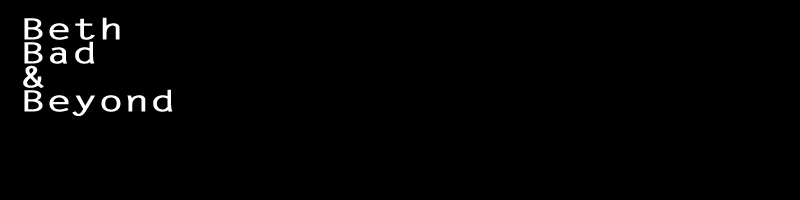
<style>
.page{position:relative;width:800px;height:200px;background:#000000}
.page>*{position:absolute;margin:0}
.t1{font:28.8px/24px "LetterGothicMT-Bold";color:#ffffff;scale:1.5 1}
</style>
<div class="page">
<p class="t1" style="left:23px;top:17px;width:150px;height:99px">Beth<br>Bad<br>&amp; <br>Beyond</p>
</div>
